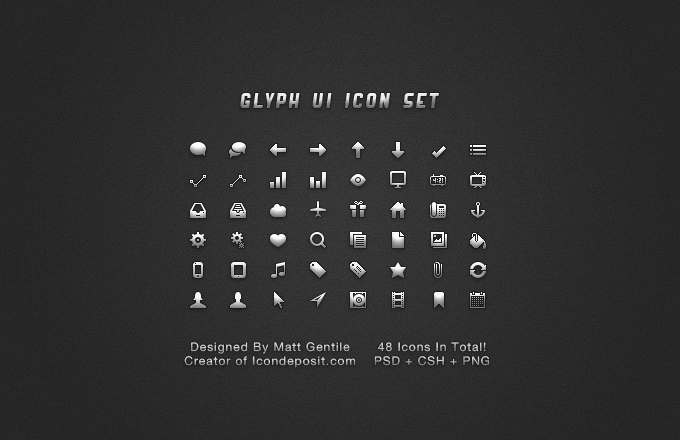
<style>
.page{position:relative;width:680px;height:440px}
.page>*{position:absolute;margin:0}
.t1{font:20.2px "Ranger";letter-spacing:0.075em}
.t2{font:12.1px "HelveticaNeue";letter-spacing:0.075em}
</style>
<div class="page">
<p class="t1" style="left:240px;top:93px;width:199px;height:15px">Glyph UI Icon Set</p>
<p class="t2" style="left:184px;top:342px;width:172px;height:26px;text-align:center">Designed By Matt Gentile<br>Creator of Icondeposit.com</p>
<p class="t2" style="left:374px;top:342px;width:116px;height:24px;text-align:center">48 Icons In Total!<br>PSD + CSH + PNG</p>
</div>
